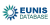
<style>
.page{position:relative;width:50px;height:25px;background:#ffffff}
.page>*{position:absolute;margin:0}
.t1{font:8px "Arial-Black";color:#0b4f8a}
.t2{font:5.5px "ArialMT"}
</style>
<div class="page">
<p class="t1" style="left:20px;top:7px;width:28px;height:7px">EUNIS</p>
<p class="t2" style="left:20px;top:14px;width:28px;height:5px">DATABASE</p>
</div>
